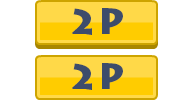
<style>
.page{position:relative;width:190px;height:100px;background:#ffffff}
.page>*{position:absolute;margin:0}
.t1{font:36px "LithosPro-Black";color:#3d4c6b}
</style>
<div class="page">
<p class="t1" style="left:72px;top:8px;width:51px;height:27px">2P</p>
<p class="t1" style="left:72px;top:63px;width:51px;height:27px">2P</p>
</div>
